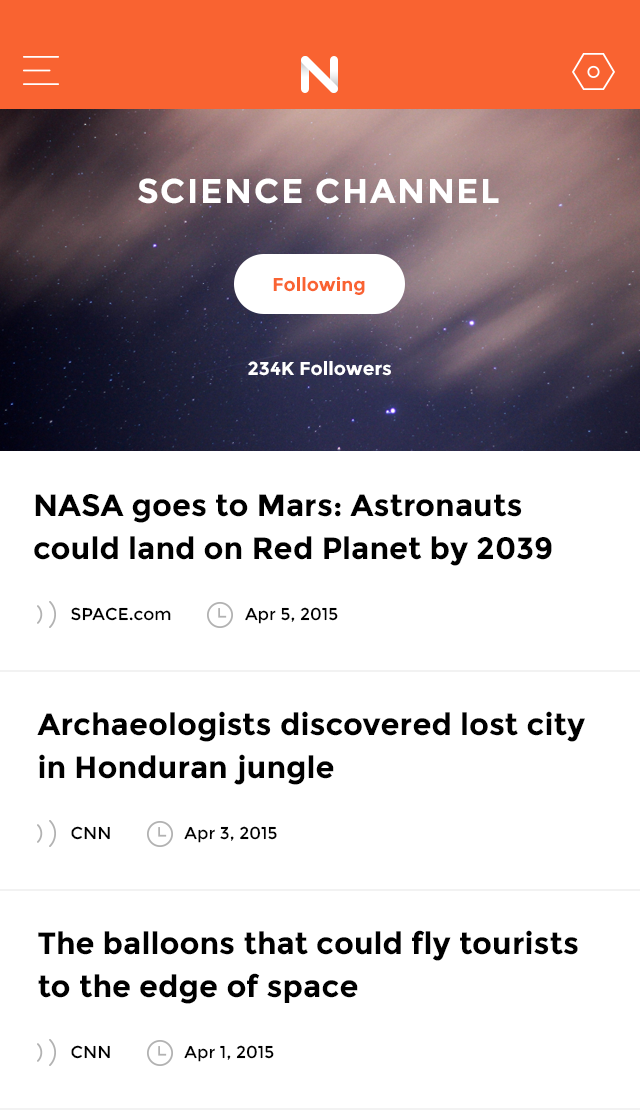
<style>
.page{position:relative;width:640px;height:1115px;background:#ffffff}
.page>*{position:absolute;margin:0}
.t1{font:34.2px "Montserrat-Bold";letter-spacing:0.05em;color:#ffffff}
.t2{font:18.8px "Montserrat-Bold";color:#f96332}
.t3{font:18.8px "Montserrat-Bold";color:#ffffff}
.t4{font:30.8px/42.8px "Montserrat-Bold";color:#000000}
.t5{font:17.1px "Montserrat-Regular";color:#000000}
</style>
<div class="page">
<p class="t1" style="left:138px;top:178px;width:361px;height:26px">SCIENCE CHANNEL</p>
<p class="t2" style="left:273px;top:276px;width:92px;height:19px">Following</p>
<p class="t3" style="left:248px;top:361px;width:143px;height:15px">234K Followers</p>
<p class="t4" style="left:34px;top:494px;width:518px;height:72px">NASA goes to Mars: Astronauts<br>could land on Red Planet by 2039</p>
<p class="t5" style="left:71px;top:607px;width:100px;height:14px">SPACE.com</p>
<p class="t5" style="left:245px;top:607px;width:93px;height:17px">Apr 5, 2015</p>
<p class="t4" style="left:37px;top:711px;width:548px;height:74px">Archaeologists discovered lost city<br>in Honduran jungle</p>
<p class="t5" style="left:71px;top:826px;width:39px;height:14px">CNN</p>
<p class="t5" style="left:184px;top:826px;width:93px;height:17px">Apr 3, 2015</p>
<p class="t4" style="left:38px;top:930px;width:540px;height:74px">The balloons that could fly tourists<br>to the edge of space</p>
<p class="t5" style="left:71px;top:1045px;width:39px;height:14px">CNN</p>
<p class="t5" style="left:184px;top:1045px;width:90px;height:17px">Apr 1, 2015</p>
</div>
